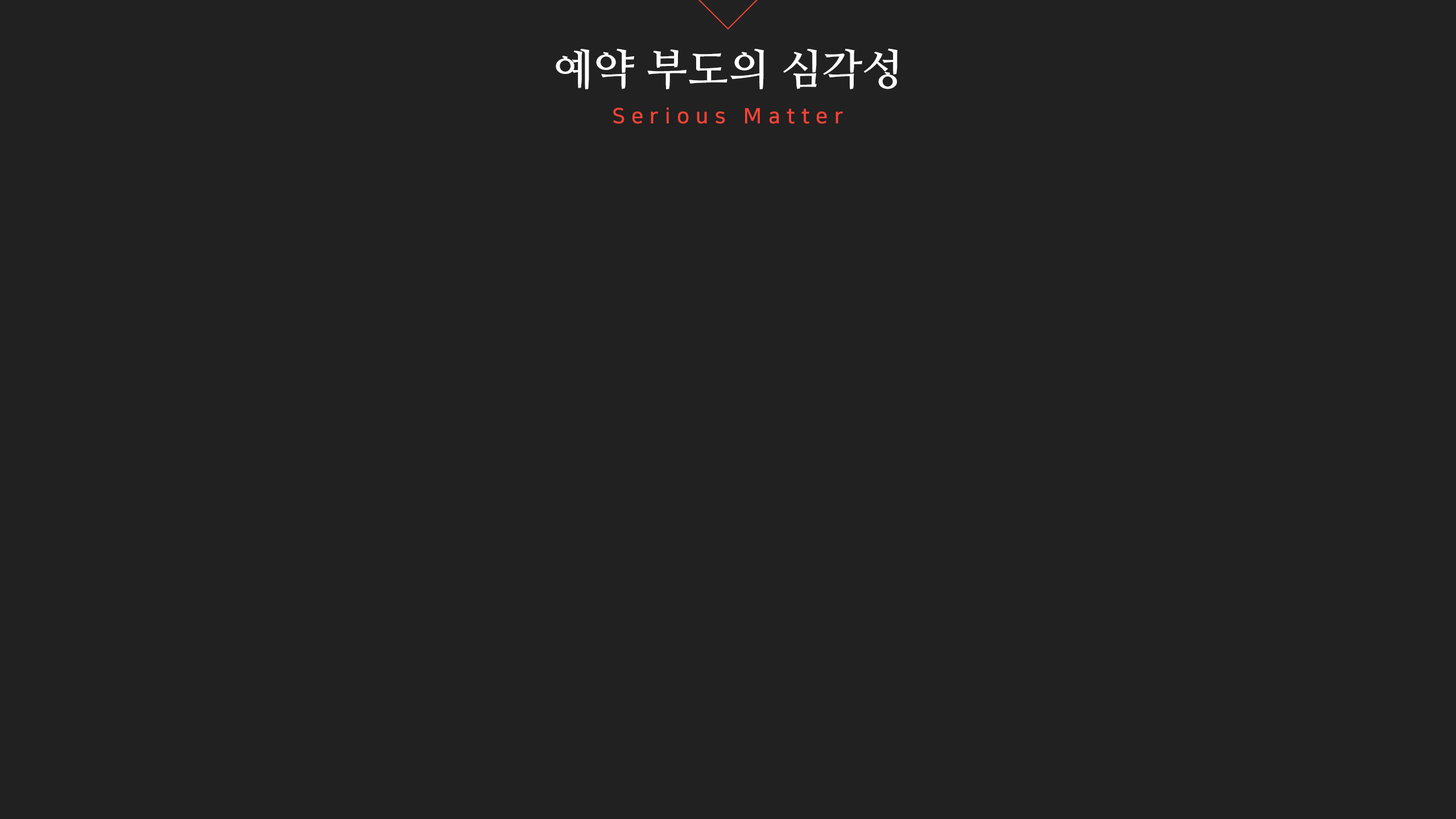
<style>
.page{position:relative;width:1456px;height:819px;background:#212121}
.page>*{position:absolute;margin:0}
.t1{font:42.7px "NanumMyeongjoBold";color:#ffffff}
.t2{font:21.3px "NanumSquareB";letter-spacing:0.3em;color:#f44336}
</style>
<div class="page">
<p class="t1" style="left:556px;top:48px;width:341px;height:42px">예약 부도의 심각성</p>
<p class="t2" style="left:613px;top:107px;width:230px;height:17px">Serious Matter</p>
</div>
